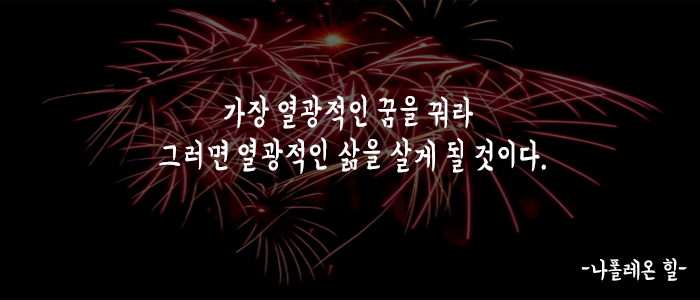
<style>
.page{position:relative;width:700px;height:300px;background:#000000}
.page>*{position:absolute;margin:0}
.t1{font:36px "BMYEONSUNG";color:#ffffff;scale:0.85 1}
.t2{font:24px "BMYEONSUNG";color:#ffffff}
</style>
<div class="page">
<p class="t1" style="left:159px;top:94px;width:387px;height:80px;text-align:center">가장 열광적인 꿈을 꿔라 <br>그러면 열광적인 삶을 살게 될 것이다.</p>
<p class="t2" style="left:581px;top:258px;width:106px;height:23px">-나폴레온 힐-</p>
</div>
